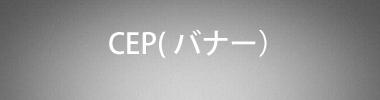
<style>
.page{position:relative;width:380px;height:100px}
.page>*{position:absolute;margin:0}
.t1{font:28.3px "KozGoPr6N-Medium";color:#ffffff}
</style>
<div class="page">
<p class="t1" style="left:109px;top:29px;width:158px;height:29px">CEP(バナー）</p>
</div>
